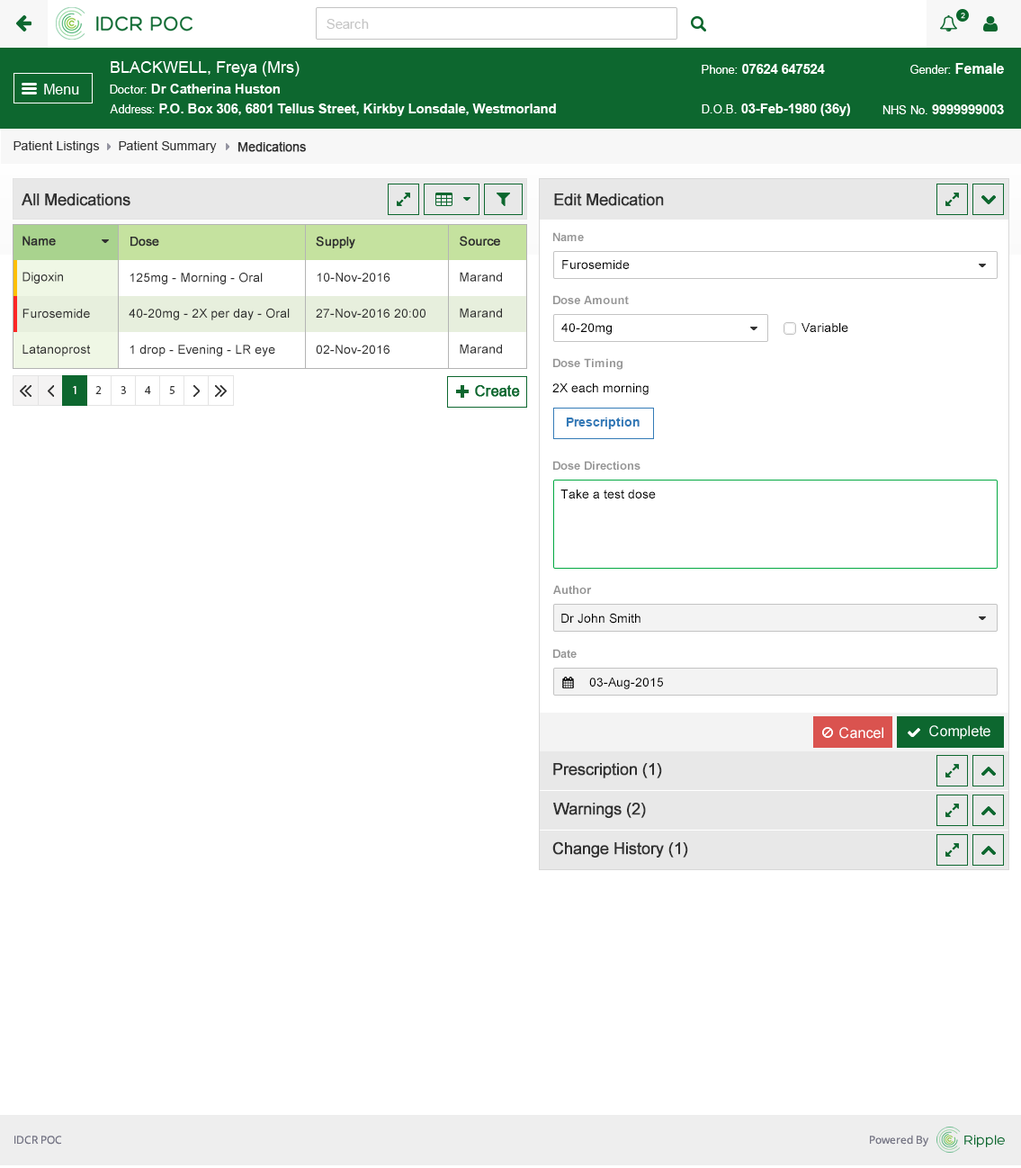
<style>
.page{position:relative;width:1021px;height:1168px;background:#ffffff}
.page>*{position:absolute;margin:0}
.t1{font:12.6px "ArialMT";color:#313131}
.t2{font:12.6px "ArialMT";color:#313131;font-weight:bold}
.t3{font:16.2px "ArialMT";color:#303030;font-weight:bold}
.t4{font:11.7px "Arial-BoldMT";color:#959595}
.t5{font:12.6px "ArialMT";color:#303030;font-weight:bold}
.t6{font:12.6px "ArialMT";color:#000000}
.t7{font:12.6px "ArialMT";color:#303030}
.t8{font:12.6px "Arial-BoldMT";color:#337ab7}
</style>
<div class="page">
<p class="t1" style="left:13px;top:140px;width:87px;height:13px">Patient Listings</p>
<p class="t1" style="left:119px;top:140px;width:98px;height:13px">Patient Summary</p>
<p class="t2" style="left:238px;top:141px;width:68px;height:11px">Medications</p>
<p class="t3" style="left:22px;top:193px;width:108px;height:13px">All Medications</p>
<p class="t3" style="left:554px;top:193px;width:110px;height:13px">Edit Medication</p>
<p class="t4" style="left:553px;top:232px;width:31px;height:9px">Name</p>
<p class="t5" style="left:22px;top:236px;width:34px;height:10px">Name</p>
<p class="t5" style="left:130px;top:237px;width:29px;height:10px">Dose</p>
<p class="t5" style="left:316px;top:236px;width:39px;height:12px">Supply</p>
<p class="t5" style="left:460px;top:236px;width:40px;height:11px">Source</p>
<p class="t6" style="left:562px;top:260px;width:68px;height:9px">Furosemide</p>
<p class="t7" style="left:22px;top:272px;width:41px;height:12px">Digoxin</p>
<p class="t7" style="left:130px;top:273px;width:133px;height:11px">125mg - Morning - Oral</p>
<p class="t7" style="left:317px;top:273px;width:73px;height:9px">10-Nov-2016</p>
<p class="t7" style="left:460px;top:272px;width:42px;height:10px">Marand</p>
<p class="t4" style="left:553px;top:295px;width:76px;height:9px">Dose Amount</p>
<p class="t7" style="left:22px;top:309px;width:68px;height:9px">Furosemide</p>
<p class="t7" style="left:129px;top:308px;width:161px;height:12px">40-20mg - 2X per day - Oral</p>
<p class="t7" style="left:316px;top:309px;width:110px;height:9px">27-Nov-2016 20:00</p>
<p class="t7" style="left:460px;top:308px;width:42px;height:10px">Marand</p>
<p class="t6" style="left:561px;top:323px;width:51px;height:12px">40-20mg</p>
<p class="t6" style="left:802px;top:323px;width:46px;height:9px">Variable</p>
<p class="t7" style="left:22px;top:345px;width:69px;height:11px">Latanoprost</p>
<p class="t7" style="left:130px;top:345px;width:145px;height:11px">1 drop - Evening - LR eye</p>
<p class="t7" style="left:316px;top:345px;width:74px;height:9px">02-Nov-2016</p>
<p class="t7" style="left:460px;top:344px;width:42px;height:10px">Marand</p>
<p class="t4" style="left:553px;top:358px;width:70px;height:12px">Dose Timing</p>
<p class="t6" style="left:552px;top:383px;width:97px;height:12px">2X each morning</p>
<p class="t8" style="left:566px;top:417px;width:74px;height:12px">Prescription</p>
<p class="t4" style="left:553px;top:461px;width:88px;height:9px">Dose Directions</p>
<p class="t6" style="left:560px;top:489px;width:96px;height:9px">Take a test dose</p>
<p class="t4" style="left:553px;top:585px;width:39px;height:9px">Author</p>
<p class="t6" style="left:561px;top:613px;width:80px;height:10px">Dr John Smith</p>
<p class="t4" style="left:553px;top:649px;width:24px;height:9px">Date</p>
<p class="t6" style="left:589px;top:677px;width:74px;height:12px">03-Aug-2015</p>
<p class="t3" style="left:553px;top:763px;width:109px;height:15px">Prescription (1)</p>
<p class="t3" style="left:553px;top:803px;width:93px;height:15px">Warnings (2)</p>
<p class="t3" style="left:552px;top:841px;width:136px;height:16px">Change History (1)</p>
</div>
